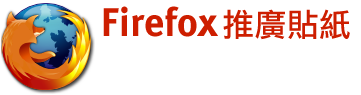
<style>
.page{position:relative;width:361px;height:95px;background:#ffffff}
.page>*{position:absolute;margin:0}
.t1{font:40px "MetaBold-Roman";letter-spacing:0.01em;color:#cd1e00}
.t2{font:32px "DFLiHeiStd-W5";letter-spacing:0.01em;color:#cd1e00}
</style>
<div class="page">
<p class="t1" style="left:103px;top:6px;width:247px;height:34px">Firefox <span class="t2">推廣貼紙</span></p>
</div>
